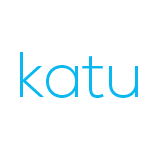
<style>
.page{position:relative;width:158px;height:160px;background:#ffffff}
.page>*{position:absolute;margin:0}
.t1{font:63.9px "NexaLight";color:#09b8f1}
</style>
<div class="page">
<p class="t1" style="left:20px;top:52px;width:118px;height:46px">katu</p>
</div>
